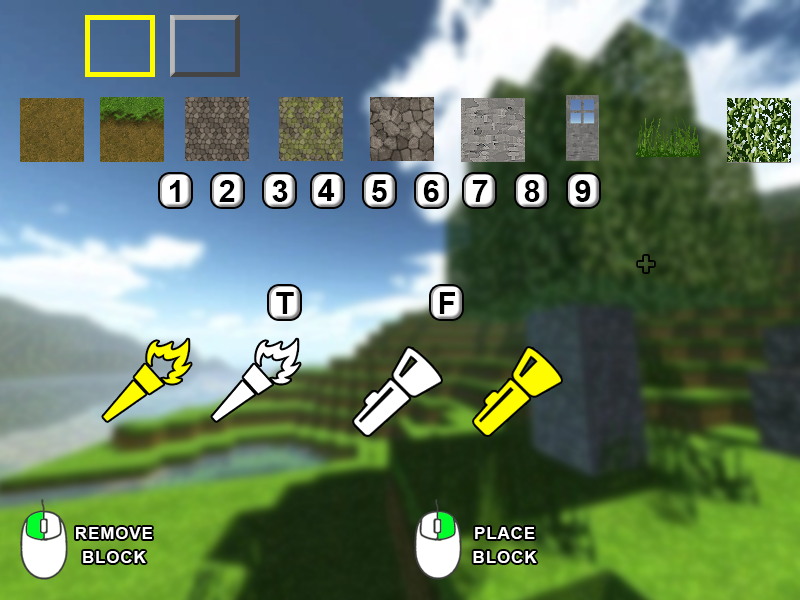
<style>
.page{position:relative;width:800px;height:600px}
.page>*{position:absolute;margin:0}
.t1{font:31px "Arial-BoldMT";letter-spacing:0.05em;color:#000000}
.t2{font:17px/12.1px "Arial-BoldMT";letter-spacing:0.05em;color:#ffffff}
</style>
<div class="page">
<p class="t1" style="left:170px;top:180px;width:10px;height:22px">1</p>
<p class="t1" style="left:219px;top:180px;width:16px;height:22px">2</p>
<p class="t1" style="left:272px;top:180px;width:16px;height:22px">3</p>
<p class="t1" style="left:318px;top:179px;width:17px;height:22px">4</p>
<p class="t1" style="left:371px;top:180px;width:16px;height:22px">5</p>
<p class="t1" style="left:423px;top:180px;width:16px;height:22px">6</p>
<p class="t1" style="left:472px;top:180px;width:16px;height:22px">7</p>
<p class="t1" style="left:524px;top:180px;width:16px;height:22px">8</p>
<p class="t1" style="left:575px;top:180px;width:16px;height:22px">9</p>
<p class="t1" style="left:276px;top:292px;width:18px;height:22px">T</p>
<p class="t1" style="left:439px;top:292px;width:16px;height:22px">F</p>
<p class="t2" style="left:76px;top:527px;width:76px;height:36px;text-align:center">REMOVE <br><br>BLOCK</p>
<p class="t2" style="left:473px;top:527px;width:64px;height:36px;text-align:center">PLACE <br><br>BLOCK</p>
</div>
